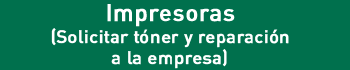
<style>
.page{position:relative;width:350px;height:70px;background:#00704d}
.page>*{position:absolute;margin:0}
.t1{font:18px "DINPro-Medium";color:#ffffff;font-weight:bold}
.t2{font:24px "DINPro-Medium";color:#ffffff;font-weight:bold}
</style>
<div class="page">
<p class="t1" style="left:51px;top:4px;width:238px;height:65px;text-align:center"><span class="t2">Impresoras<br></span>(Solicitar tóner y reparación<br>a la empresa)</p>
</div>
